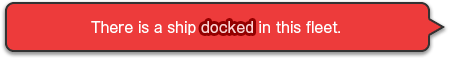
<style>
.page{position:relative;width:450px;height:58px;background:#ed3b3b}
.page>*{position:absolute;margin:0}
.t1{font:14px "GothicMB101Pro-Regular";color:#ffffff}
.t2{font:14px "GothicMB101Pro-Regular";color:#ffd3d3}
</style>
<div class="page">
<p class="t1" style="left:91px;top:21px;width:249px;height:14px">There is a ship <span class="t2">docked</span> in this fleet.</p>
<p class="t1" style="left:91px;top:21px;width:249px;height:14px">There is a  ship <span class="t2">docked</span> in this fleet.</p>
</div>
